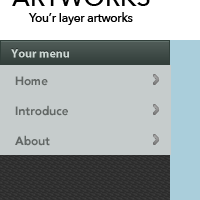
<style>
.page{position:relative;width:200px;height:200px;background:#c6cccc}
.page>*{position:absolute;margin:0}
.t1{font:12px "MyriadPro-Bold";color:#ccd7d3}
.t2{font:12px "Avenir-Black";color:#626765}
</style>
<div class="page">
<p class="t1" style="left:11px;top:49px;width:58px;height:9px">Your menu</p>
<p class="t2" style="left:15px;top:76px;width:33px;height:10px">Home</p>
<p class="t2" style="left:15px;top:105px;width:53px;height:11px">Introduce</p>
<p class="t2" style="left:15px;top:135px;width:35px;height:11px">About</p>
</div>
